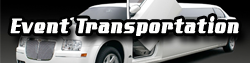
<style>
.page{position:relative;width:250px;height:63px}
.page>*{position:absolute;margin:0}
.t1{font:28.4px "AddCityboyNormal";letter-spacing:0.05em;color:#fefefd;font-weight:bold;scale:0.61 1}
</style>
<div class="page">
<p class="t1" style="left:10px;top:16px;width:229px;height:20px">Event Transportation</p>
</div>
